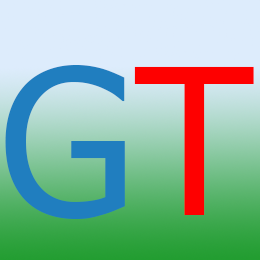
<style>
.page{position:relative;width:260px;height:260px;background:#ddecfc}
.page>*{position:absolute;margin:0}
.t1{font:203.1px "Tahoma";color:#207ebf}
.t2{font:203.1px "Tahoma";color:#fe0000}
</style>
<div class="page">
<p class="t1" style="left:5px;top:64px;width:120px;height:155px">G</p>
<p class="t2" style="left:134px;top:66px;width:120px;height:149px">T</p>
</div>
